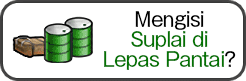
<style>
.page{position:relative;width:246px;height:81px;background:#ffffff}
.page>*{position:absolute;margin:0}
.t1{font:20px/20px "GothicMB101Pro-Regular";letter-spacing:-0.04em;color:#037302}
.t2{font:20px/20px "GothicMB101Pro-Regular";letter-spacing:-0.04em;color:#000000}
</style>
<div class="page">
<p class="t1" style="left:104px;top:11px;width:132px;height:59px;text-align:center"><span class="t2">Mengisi<br></span>Suplai di<br>Lepas Pantai<span class="t2">?</span></p>
</div>
